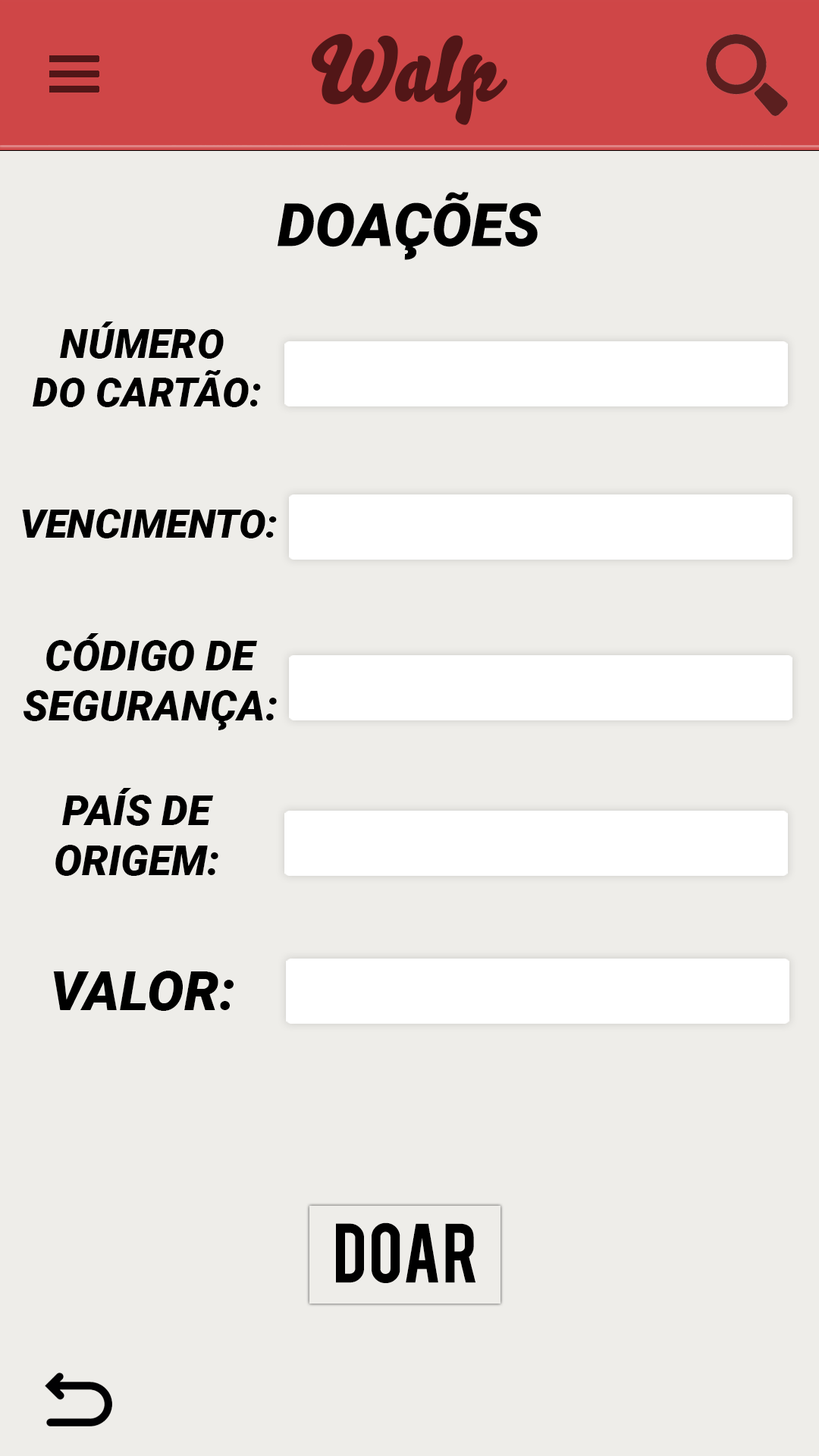
<style>
.page{position:relative;width:819px;height:1456px;background:#eeede9}
.page>*{position:absolute;margin:0}
.t1{font:90.5px "Bello-Pro";color:#521617}
.t2{font:59.6px "Roboto-BlackItalic";color:#000000}
.t3{font:40.3px "Roboto-BlackItalic";color:#000000}
.t4{font:39.7px "Roboto-BlackItalic";color:#000000}
.t5{font:41.8px "Roboto-BlackItalic";color:#000000}
.t6{font:54.6px "Roboto-BlackItalic";color:#000000}
.t7{font:65.8px "Bebas";color:#000000}
</style>
<div class="page">
<p class="t1" style="left:311px;top:33px;width:196px;height:92px">Walp</p>
<p class="t2" style="left:278px;top:192px;width:263px;height:68px">DOAÇÕES</p>
<p class="t3" style="left:33px;top:322px;width:228px;height:85px;text-align:center">NÚMERO <br>DO CARTÃO:</p>
<p class="t4" style="left:22px;top:509px;width:255px;height:29px">VENCIMENTO:</p>
<p class="t5" style="left:24px;top:633px;width:253px;height:97px;text-align:center">CÓDIGO DE<br>SEGURANÇA:</p>
<p class="t5" style="left:55px;top:788px;width:163px;height:88px;text-align:center">PAÍS DE<br>ORIGEM:</p>
<p class="t6" style="left:53px;top:971px;width:181px;height:40px">VALOR:</p>
<p class="t7" style="left:336px;top:1222px;width:139px;height:61px">dOAR</p>
</div>
